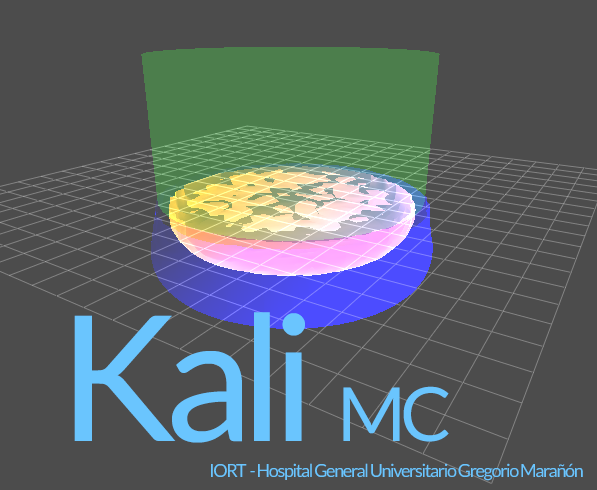
<style>
.page{position:relative;width:597px;height:490px;background:#4c4c4c}
.page>*{position:absolute;margin:0}
.t1{font:175px "Lato-Regular";letter-spacing:-0.075em;color:#6ac5fe}
.t2{font:75px "Lato-Regular";letter-spacing:-0.075em;color:#6ac5fe}
.t3{font:18px "Lato-Regular";letter-spacing:-0.075em;color:#6ac5fe}
</style>
<div class="page">
<p class="t1" style="left:74px;top:312px;width:231px;height:131px">Kali</p>
<p class="t2" style="left:343px;top:386px;width:106px;height:56px">MC</p>
<p class="t3" style="left:211px;top:463px;width:372px;height:18px">IORT  - Hospital General Universitario Gregorio Marañón</p>
</div>
